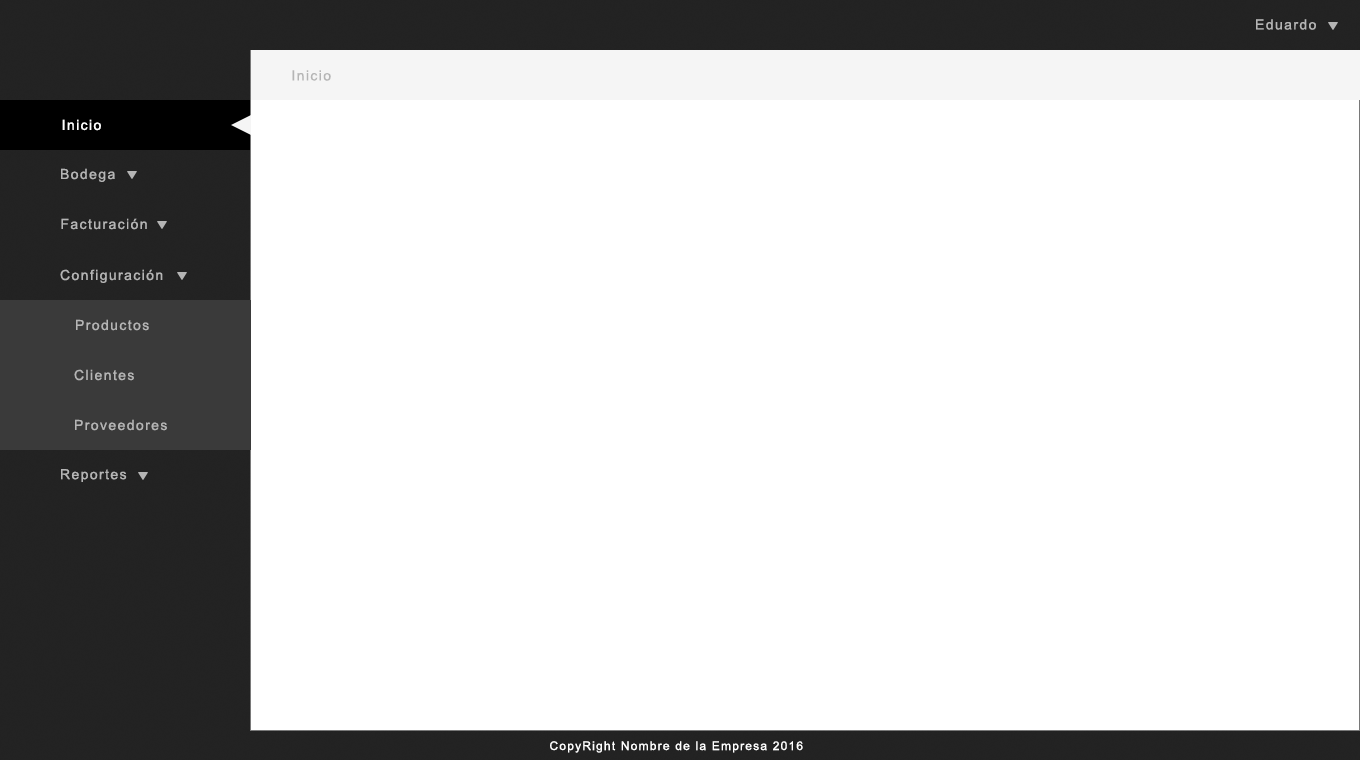
<style>
.page{position:relative;width:1360px;height:760px;background:#ffffff}
.page>*{position:absolute;margin:0}
.t1{font:14px "ArialMT";letter-spacing:0.1em;color:#b5b5b5}
.t2{font:14px "ArialMT";letter-spacing:0.1em;color:#ffffff}
.t3{font:12px "ArialMT";letter-spacing:0.1em;color:#ffffff}
</style>
<div class="page">
<p class="t1" style="left:1256px;top:19px;width:60px;height:11px">Eduardo</p>
<p class="t1" style="left:292px;top:70px;width:39px;height:11px">Inicio</p>
<p class="t2" style="left:62px;top:119px;width:39px;height:12px">Inicio</p>
<p class="t1" style="left:61px;top:168px;width:54px;height:14px">Bodega</p>
<p class="t1" style="left:61px;top:218px;width:86px;height:12px">Facturación</p>
<p class="t1" style="left:60px;top:269px;width:103px;height:14px">Configuración</p>
<p class="t1" style="left:76px;top:319px;width:73px;height:12px">Productos</p>
<p class="t1" style="left:74px;top:369px;width:60px;height:12px">Clientes</p>
<p class="t1" style="left:75px;top:419px;width:92px;height:12px">Proveedores</p>
<p class="t1" style="left:61px;top:469px;width:66px;height:13px">Reportes</p>
<p class="t3" style="left:550px;top:741px;width:253px;height:12px">CopyRight Nombre de la Empresa 2016</p>
</div>
